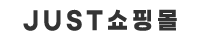
<style>
.page{position:relative;width:200px;height:40px;background:#ffffff}
.page>*{position:absolute;margin:0}
.t1{font:24.1px "GmarketSansTTFBold";letter-spacing:0.2em;color:#333333;text-transform:uppercase;scale:0.89 1}
</style>
<div class="page">
<p class="t1" style="left:23px;top:9px;width:154px;height:22px">just쇼핑몰</p>
</div>
